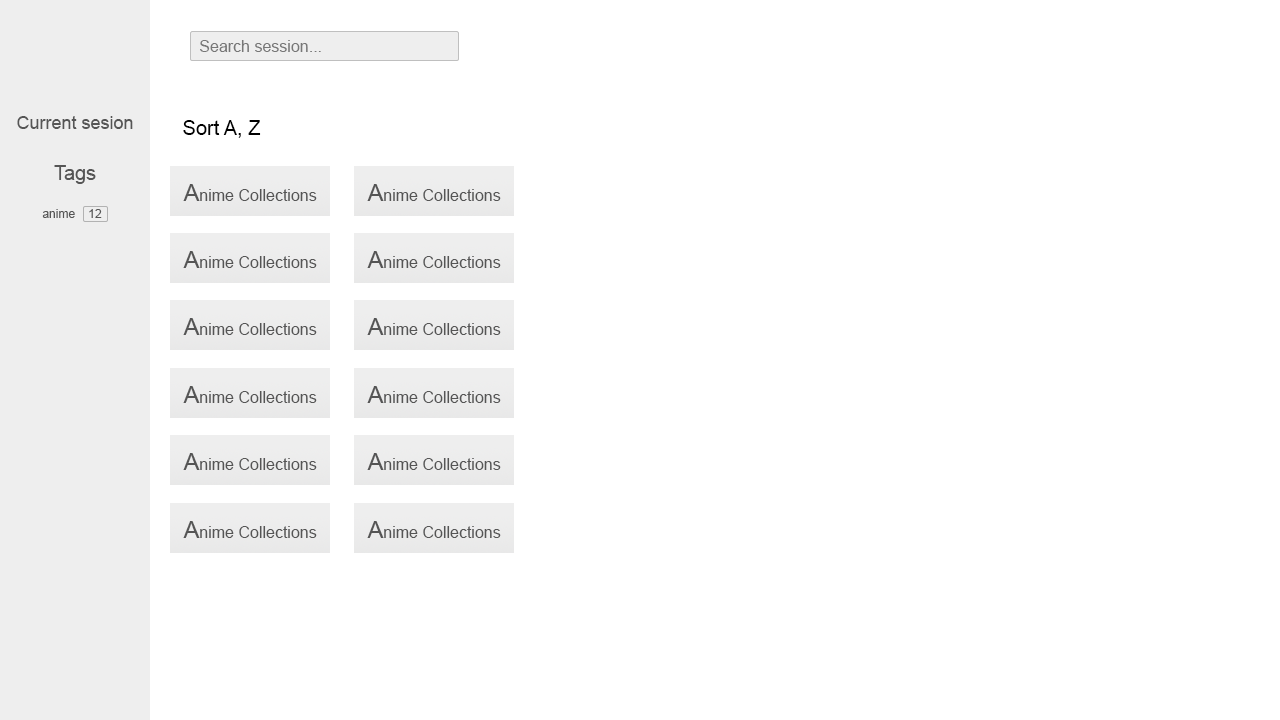
<style>
.page{position:relative;width:1280px;height:720px;background:#ffffff}
.page>*{position:absolute;margin:0}
.t1{font:16px "ArialMT";color:#777777}
.t2{font:18px "ArialMT";color:#555555}
.t3{font:20px "ArialMT";color:#000000}
.t4{font:20px "ArialMT";color:#555555}
.t5{font:16px "ArialMT";color:#555555}
.t6{font:24px "ArialMT";color:#555555}
.t7{font:12px "ArialMT";color:#555555}
</style>
<div class="page">
<p class="t1" style="left:200px;top:40px;width:121px;height:12px">Search session...</p>
<p class="t2" style="left:17px;top:116px;width:116px;height:13px">Current sesion</p>
<p class="t3" style="left:183px;top:120px;width:78px;height:18px">Sort A, Z</p>
<p class="t4" style="left:54px;top:165px;width:42px;height:19px">Tags</p>
<p class="t5" style="left:183px;top:184px;width:134px;height:17px"><span class="t6">A</span>nime Collections</p>
<p class="t5" style="left:367px;top:184px;width:134px;height:17px"><span class="t6">A</span>nime Collections</p>
<p class="t7" style="left:42px;top:209px;width:33px;height:9px">anime</p>
<p class="t7" style="left:89px;top:209px;width:13px;height:9px">12</p>
<p class="t5" style="left:183px;top:251px;width:134px;height:17px"><span class="t6">A</span>nime Collections</p>
<p class="t5" style="left:367px;top:251px;width:134px;height:17px"><span class="t6">A</span>nime Collections</p>
<p class="t5" style="left:183px;top:318px;width:134px;height:17px"><span class="t6">A</span>nime Collections</p>
<p class="t5" style="left:367px;top:318px;width:134px;height:17px"><span class="t6">A</span>nime Collections</p>
<p class="t5" style="left:183px;top:386px;width:134px;height:17px"><span class="t6">A</span>nime Collections</p>
<p class="t5" style="left:367px;top:386px;width:134px;height:17px"><span class="t6">A</span>nime Collections</p>
<p class="t5" style="left:183px;top:453px;width:134px;height:17px"><span class="t6">A</span>nime Collections</p>
<p class="t5" style="left:367px;top:453px;width:134px;height:17px"><span class="t6">A</span>nime Collections</p>
<p class="t5" style="left:183px;top:521px;width:134px;height:17px"><span class="t6">A</span>nime Collections</p>
<p class="t5" style="left:367px;top:521px;width:134px;height:17px"><span class="t6">A</span>nime Collections</p>
</div>
